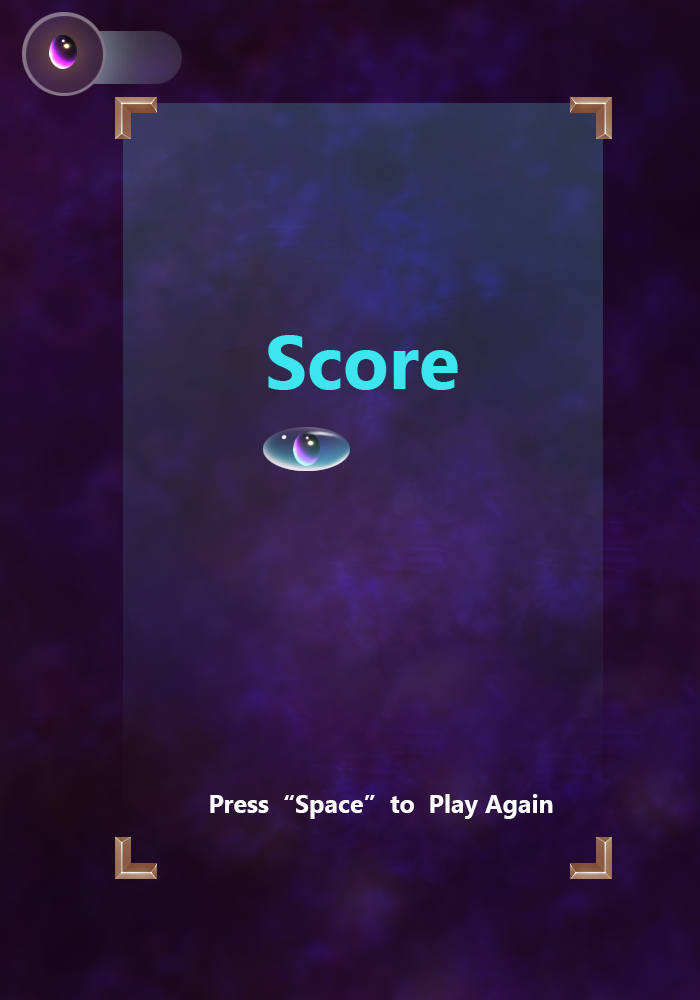
<style>
.page{position:relative;width:700px;height:1000px}
.page>*{position:absolute;margin:0}
.t1{font:75px "MyanmarText-Bold";color:#3de6ef}
.t2{font:25px "MyanmarText-Bold";color:#ffffff}
</style>
<div class="page">
<p class="t1" style="left:268px;top:335px;width:190px;height:55px">Score</p>
<p class="t2" style="left:210px;top:794px;width:343px;height:25px">Press  “Space”  to  Play Again</p>
</div>
